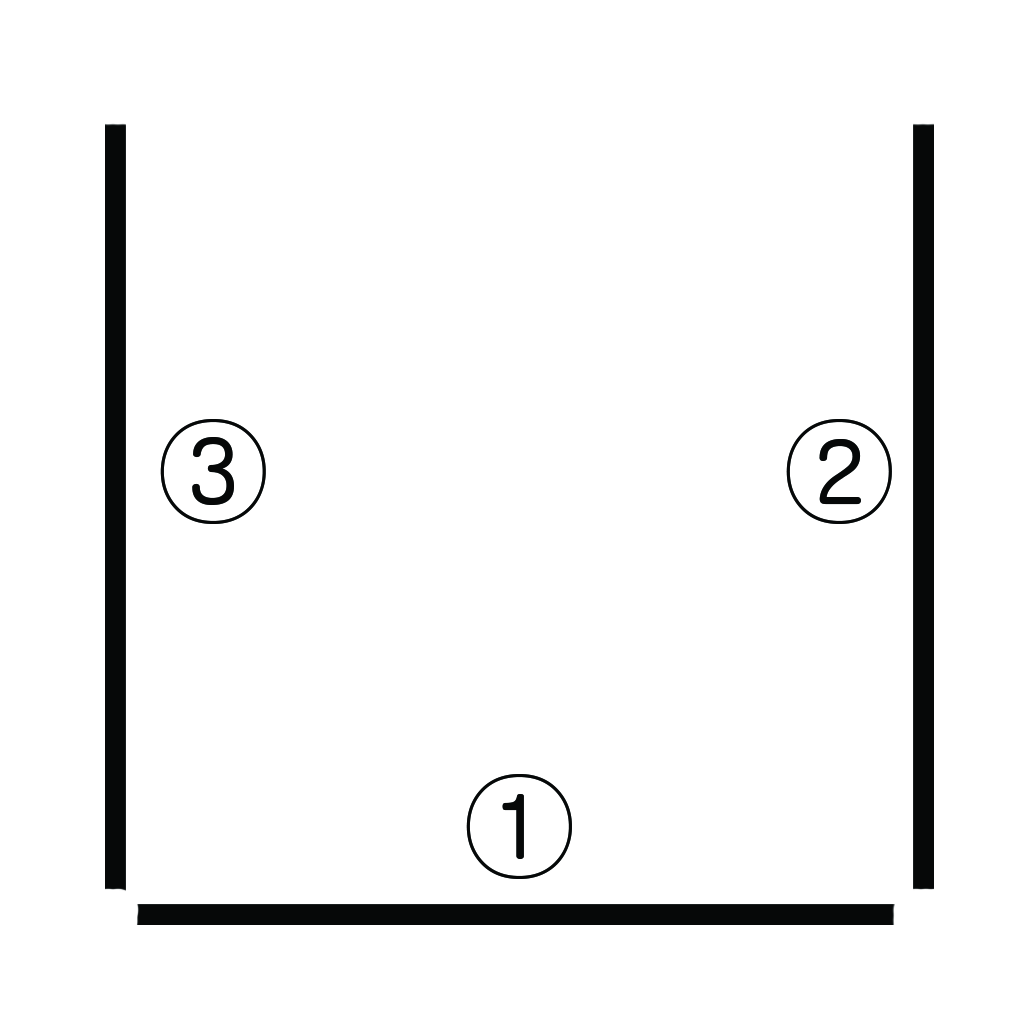
<style>
.page{position:relative;width:1024px;height:1024px;background:#ffffff}
.page>*{position:absolute;margin:0}
.t1{font:116.7px "Gulim";color:#060808}
</style>
<div class="page">
<p class="t1" style="left:160px;top:419px;width:106px;height:105px">③</p>
<p class="t1" style="left:786px;top:419px;width:106px;height:105px">②</p>
<p class="t1" style="left:466px;top:774px;width:106px;height:105px">①</p>
</div>
